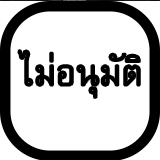
<style>
.page{position:relative;width:160px;height:160px;background:#ffffff}
.page>*{position:absolute;margin:0}
.t1{font:50px "FreesiaUPC";color:#000000}
</style>
<div class="page">
<p class="t1" style="left:18px;top:49px;width:122px;height:48px">ไม่อนุมัติ</p>
</div>
